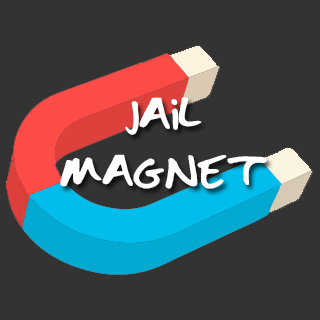
<style>
.page{position:relative;width:320px;height:320px;background:#333333}
.page>*{position:absolute;margin:0}
.t1{font:48px "emilyyyyyy";color:#ffffff}
</style>
<div class="page">
<p class="t1" style="left:60px;top:97px;width:207px;height:92px;text-align:center">JAIL<br>MAGNET</p>
</div>
